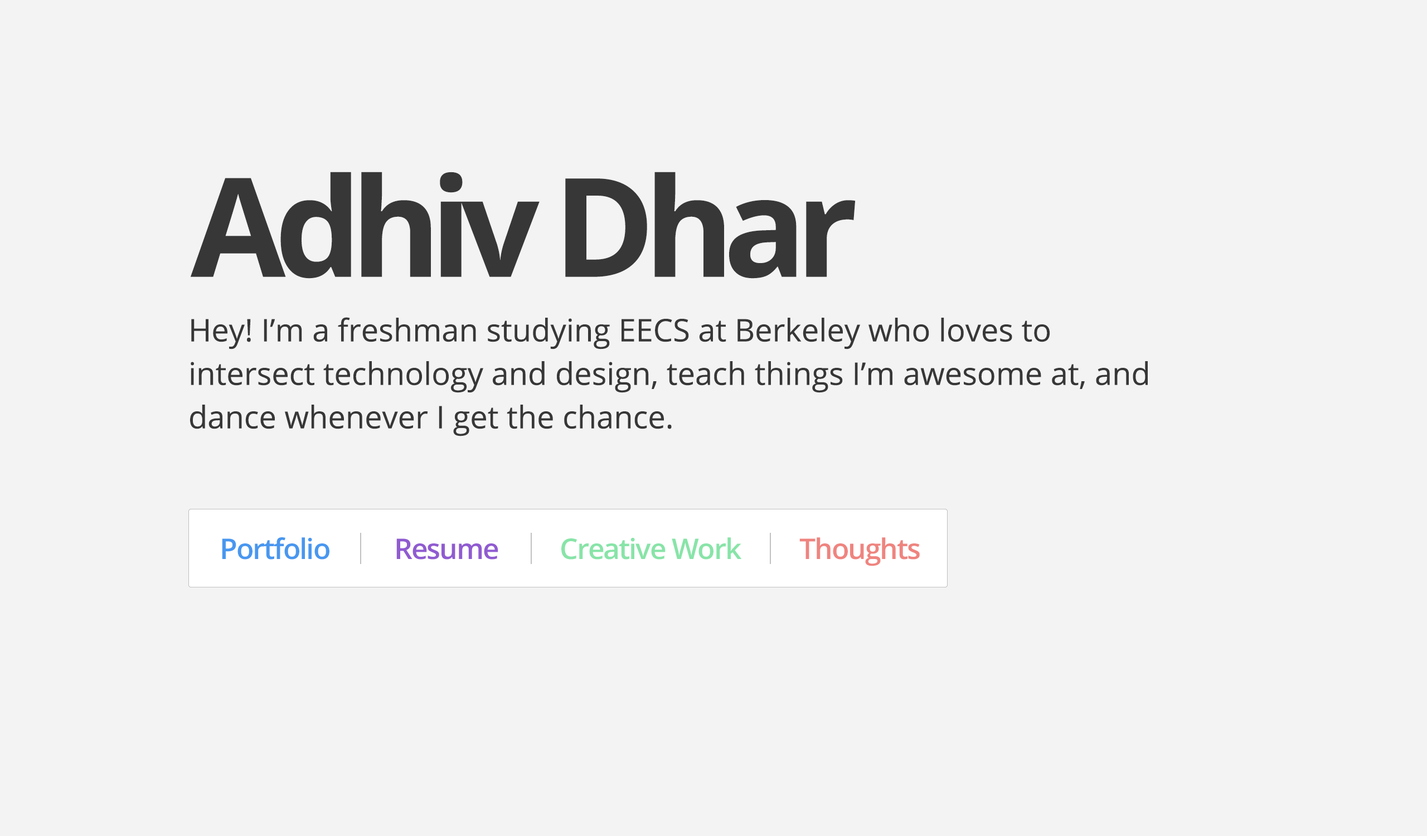
<style>
.page{position:relative;width:1427px;height:836px;background:#f3f3f3}
.page>*{position:absolute;margin:0}
.t1{font:137.6px "OpenSans-Bold";letter-spacing:-0.08em;color:#373737}
.t2{font:31.2px/43.5px "OpenSans";color:#373737}
.t3{font:28.4px "OpenSans-Semibold";letter-spacing:-0.04em;color:#4897f0}
.t4{font:28.4px "OpenSans-Semibold";letter-spacing:-0.04em;color:#905bd1}
.t5{font:28.4px "OpenSans-Semibold";letter-spacing:-0.04em;color:#88e4a8}
.t6{font:28.4px "OpenSans-Semibold";letter-spacing:-0.04em;color:#ef847f}
</style>
<div class="page">
<p class="t1" style="left:191px;top:172px;width:664px;height:107px">Adhiv Dhar</p>
<p class="t2" style="left:190px;top:317px;width:957px;height:119px">Hey! I’m a freshman studying EECS at Berkeley who loves to intersect technology and design, teach things I’m awesome at, and dance whenever I get the chance.</p>
<p class="t3" style="left:222px;top:537px;width:107px;height:22px">Portfolio</p>
<p class="t4" style="left:396px;top:538px;width:102px;height:21px">Resume</p>
<p class="t5" style="left:561px;top:537px;width:181px;height:22px">Creative Work</p>
<p class="t6" style="left:799px;top:537px;width:120px;height:29px">Thoughts</p>
</div>
